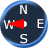
<style>
.page{position:relative;width:48px;height:48px;background:#1d2c3f}
.page>*{position:absolute;margin:0}
.t1{font:12px "Verdana";color:#ffffff}
</style>
<div class="page">
<p class="t1" style="left:20px;top:5px;width:7px;height:9px">N</p>
<p class="t1" style="left:3px;top:20px;width:12px;height:9px">W</p>
<p class="t1" style="left:37px;top:19px;width:7px;height:9px">E</p>
<p class="t1" style="left:20px;top:34px;width:8px;height:10px">S</p>
</div>
